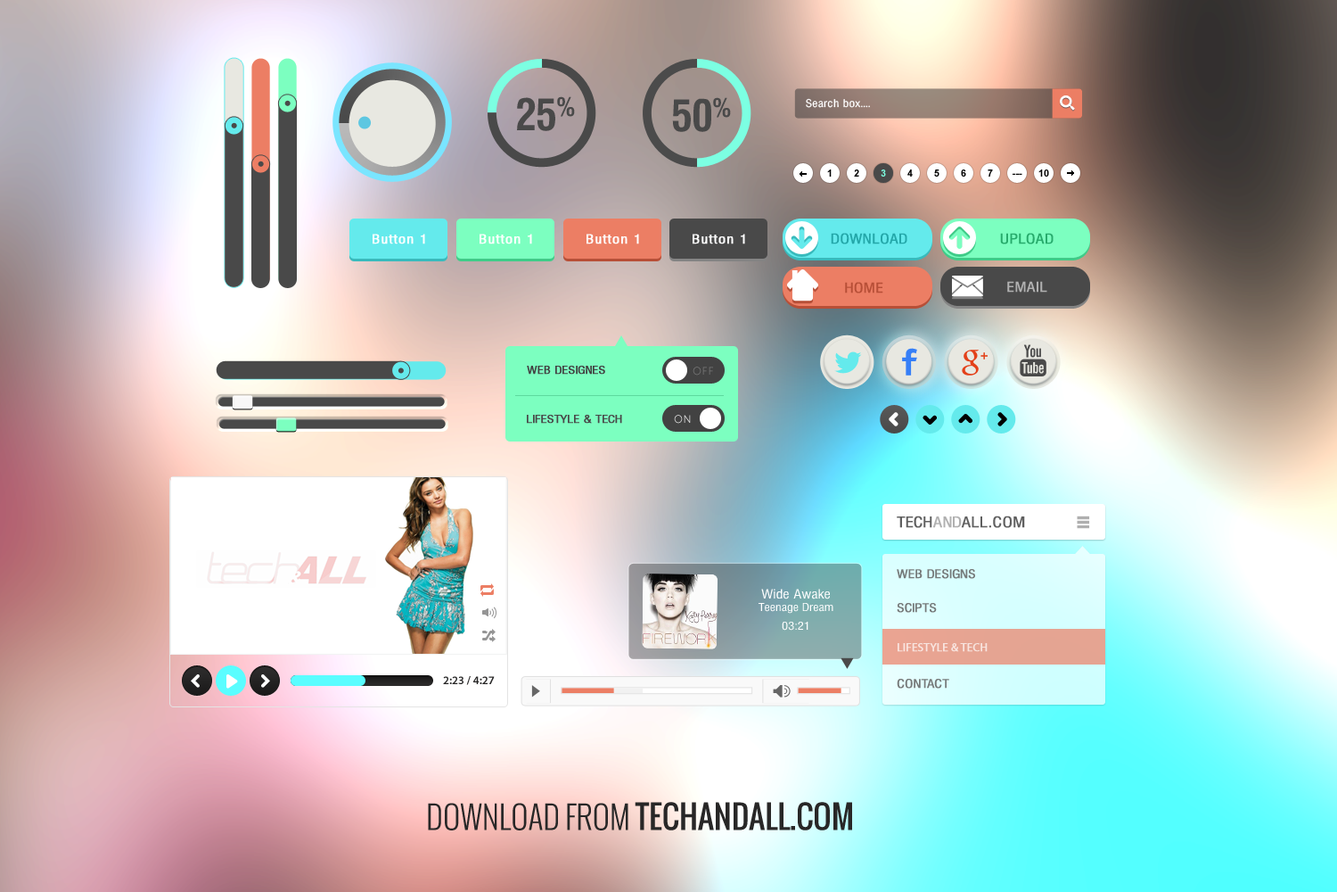
<style>
.page{position:relative;width:1337px;height:892px}
.page>*{position:absolute;margin:0}
.t1{font:42.8px "MilfordCondensedBold";letter-spacing:-0.02em;color:#494949}
.t2{font:10.4px "Milford";letter-spacing:0.025em;color:#ffffff}
.t3{font:9.8px "Arial-BoldMT";color:#000000;text-transform:uppercase}
.t4{font:9.8px "Arial-BoldMT";color:#7cffe2;text-transform:uppercase}
.t5{font:12.5px "Milford";letter-spacing:0.06em;color:#ffffff;font-weight:bold}
.t6{font:13.4px "Milford";color:#23a7a9;text-transform:uppercase;font-weight:bold}
.t7{font:13.4px "Milford";color:#27ab6c;text-transform:uppercase;font-weight:bold}
.t8{font:13.4px "Milford";color:#b74f37;text-transform:uppercase;font-weight:bold}
.t9{font:13.4px "Milford";color:#b1b1b1;text-transform:uppercase;font-weight:bold}
.t10{font:10.7px "Milford";color:#424242;font-weight:bold}
.t11{font:10.7px "MuseoSans-300";letter-spacing:0.06em;color:#787878}
.t12{font:10.7px "Milford";color:#494949;font-weight:bold}
.t13{font:10.7px "MuseoSans-300";letter-spacing:0.06em;color:#e5e5e5}
.t14{font:14.3px "Milford";color:#5f5f5f;font-weight:bold}
.t15{font:14.3px "Milford";color:#b0b0b0;font-weight:bold}
.t16{font:11.6px "Milford";color:#6a6a6a;text-transform:uppercase;font-weight:bold}
.t17{font:10.7px/6.2px "Milford";color:#ffffff}
.t18{font:12.5px/6.2px "Milford";color:#ffffff}
.t19{font:11.6px "MyriadPro-Regular";color:#f8e4df;text-transform:uppercase;font-weight:bold}
.t20{font:11.6px "MyriadPro-Semibold";color:#262525}
.t21{font:31.5px "Oswald";color:#282727}
.t22{font:31.5px "Oswald-Light";color:#282727}
</style>
<div class="page">
<p class="t1" style="left:517px;top:96px;width:58px;height:35px">25%</p>
<p class="t1" style="left:672px;top:97px;width:59px;height:35px">50%</p>
<p class="t2" style="left:806px;top:98px;width:64px;height:10px">Search box....</p>
<p class="t3" style="left:827px;top:169px;width:5px;height:8px">1</p>
<p class="t3" style="left:854px;top:169px;width:6px;height:8px">2</p>
<p class="t4" style="left:881px;top:169px;width:5px;height:8px">3</p>
<p class="t3" style="left:908px;top:169px;width:5px;height:8px">4</p>
<p class="t3" style="left:934px;top:169px;width:6px;height:8px">5</p>
<p class="t3" style="left:961px;top:169px;width:5px;height:8px">6</p>
<p class="t3" style="left:988px;top:169px;width:5px;height:8px">7</p>
<p class="t3" style="left:1013px;top:173px;width:10px;height:2px">---</p>
<p class="t3" style="left:1039px;top:169px;width:10px;height:8px">10</p>
<p class="t5" style="left:373px;top:234px;width:52px;height:10px">Button 1</p>
<p class="t5" style="left:480px;top:234px;width:52px;height:10px">Button 1</p>
<p class="t5" style="left:587px;top:234px;width:52px;height:10px">Button 1</p>
<p class="t5" style="left:693px;top:234px;width:52px;height:10px">Button 1</p>
<p class="t6" style="left:831px;top:233px;width:77px;height:11px">Download</p>
<p class="t7" style="left:1000px;top:233px;width:54px;height:11px">UPLOAD</p>
<p class="t8" style="left:845px;top:282px;width:39px;height:11px">HOME</p>
<p class="t9" style="left:1008px;top:281px;width:40px;height:11px">EMAIL</p>
<p class="t10" style="left:527px;top:366px;width:78px;height:8px">WEB DESIGNES</p>
<p class="t11" style="left:693px;top:366px;width:20px;height:9px">OFF</p>
<p class="t12" style="left:527px;top:415px;width:95px;height:9px">LIFESTYLE &amp; TECH</p>
<p class="t13" style="left:674px;top:415px;width:17px;height:9px">ON</p>
<p class="t14" style="left:897px;top:515px;width:128px;height:13px">TECH<span class="t15">AND</span>ALL.COM</p>
<p class="t16" style="left:897px;top:569px;width:78px;height:10px;opacity:0.9">Web DESIGNS</p>
<p class="t17" style="left:759px;top:588px;width:75px;height:42px;text-align:center"><span class="t18">Wide Awake<br> <br></span>Teenage Dream<br><br><br>03:21</p>
<p class="t16" style="left:897px;top:603px;width:40px;height:10px;opacity:0.9">SCIPTS</p>
<p class="t19" style="left:898px;top:643px;width:90px;height:9px">LIFESTYLE &amp; TECH</p>
<p class="t20" style="left:443px;top:676px;width:52px;height:9px">2:23 / 4:27</p>
<p class="t16" style="left:897px;top:679px;width:53px;height:9px;opacity:0.9">CONTACT</p>
<p class="t21" style="left:428px;top:802px;width:424px;height:28px"><span class="t22">DOWNLOAD FROM </span>TECHANDALL.COM</p>
</div>
